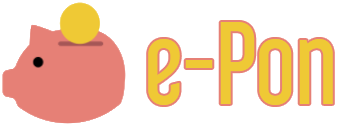
<style>
.page{position:relative;width:339px;height:130px;background:#ffffff}
.page>*{position:absolute;margin:0}
.t1{font:105px "LibelSuitRg-Regular";color:#efc935}
</style>
<div class="page">
<p class="t1" style="left:148px;top:22px;width:185px;height:83px">e-Pon</p>
</div>
